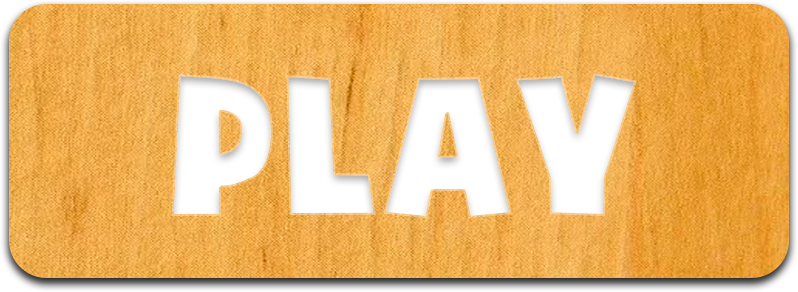
<style>
.page{position:relative;width:798px;height:292px}
.page>*{position:absolute;margin:0}
.t1{font:225px "SoupofJustice";color:#ffffff}
</style>
<div class="page">
<p class="t1" style="left:171px;top:73px;width:466px;height:145px">PLAY</p>
</div>
